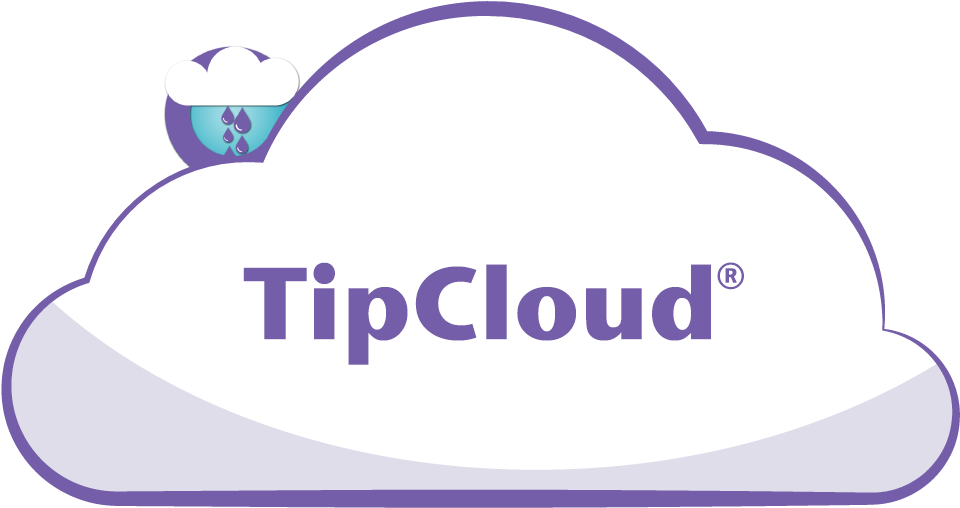
<style>
.page{position:relative;width:960px;height:508px;background:#ffffff}
.page>*{position:absolute;margin:0}
.t1{font:102px "StoneSansOSITCTTBold";color:#755ea9}
.t2{font:72px "StoneSansOSITCTTBold";color:#755ea9}
</style>
<div class="page">
<p class="t1" style="left:243px;top:262px;width:468px;height:103px">TipCloud</p>
<p class="t2" style="left:717px;top:262px;width:27px;height:28px">®</p>
</div>
